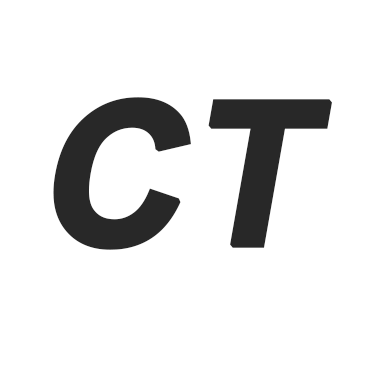
<style>
.page{position:relative;width:366px;height:366px;background:#ffffff}
.page>*{position:absolute;margin:0}
.t1{font:200px "Arial-BoldMT";color:#282828;font-weight:bold;font-style:italic}
</style>
<div class="page">
<p class="t1" style="left:53px;top:97px;width:279px;height:153px">CT</p>
</div>
